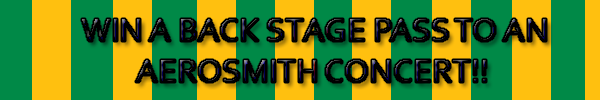
<style>
.page{position:relative;width:600px;height:100px;background:#008947}
.page>*{position:absolute;margin:0}
.t1{font:34px "Corbel"}
</style>
<div class="page">
<p class="t1" style="left:82px;top:19px;width:464px;height:63px">WIN A BACK STAGE PASS TO AN <br>        AEROSMITH CONCERT!!</p>
</div>
